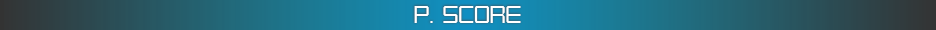
<style>
.page{position:relative;width:936px;height:30px}
.page>*{position:absolute;margin:0}
.t1{font:24.2px "KarnivoreLite";color:#ffffff;text-transform:uppercase;scale:0.82 1}
</style>
<div class="page">
<p class="t1" style="left:414px;top:6px;width:107px;height:17px">P. SCORE</p>
</div>
